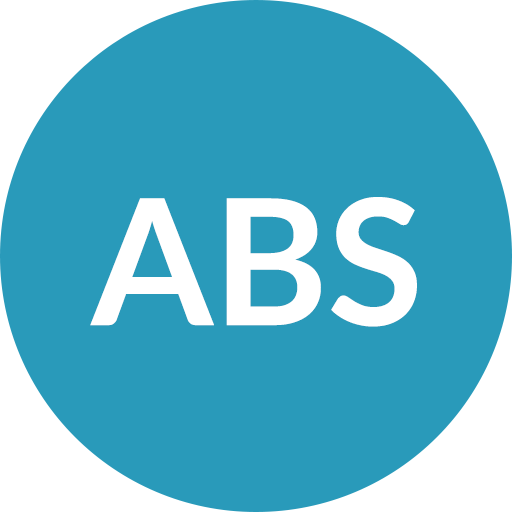
<style>
.page{position:relative;width:512px;height:512px;background:#299aba}
.page>*{position:absolute;margin:0}
.t1{font:175px "Lato-Bold";color:#ffffff}
</style>
<div class="page">
<p class="t1" style="left:90px;top:197px;width:327px;height:130px">ABS</p>
</div>
